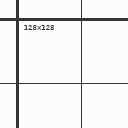
<style>
.page{position:relative;width:128px;height:128px;background:#fcfcfc}
.page>*{position:absolute;margin:0}
.t1{font:8px "Consolas";color:#343434}
</style>
<div class="page">
<p class="t1" style="left:24px;top:25px;width:30px;height:5px">128x128</p>
</div>
